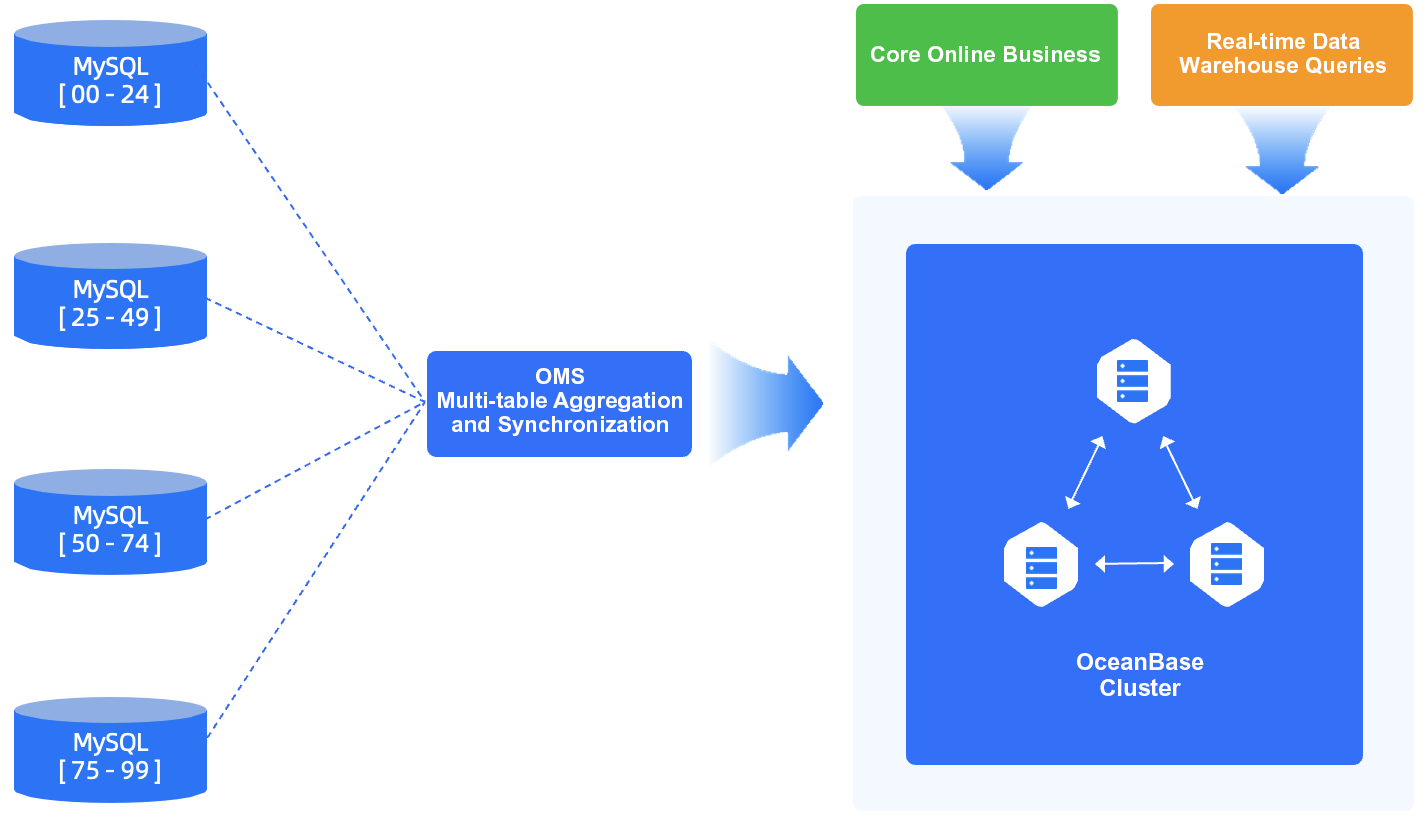
<style>
.page{position:relative;width:1423px;height:818px;background:#ffffff}
.page>*{position:absolute;margin:0}
.t1{font:22.1px/24px "Arial-BoldMT";color:#ffffff}
.t2{font:22.1px "Arial-BoldMT";color:#ffffff}
.t3{font:23.6px/25.6px "Arial-BoldMT";color:#ffffff}
</style>
<div class="page">
<p class="t1" style="left:1179px;top:33px;width:207px;height:42px;text-align:center">Real-time Data<br>Warehouse Queries</p>
<p class="t2" style="left:871px;top:46px;width:229px;height:16px">Core Online Business</p>
<p class="t1" style="left:438px;top:368px;width:244px;height:68px;text-align:center">OMS<br>Multi-table Aggregation<br>and Synchronization</p>
<p class="t3" style="left:1077px;top:653px;width:127px;height:43px;text-align:center">OceanBase<br>Cluster</p>
</div>
